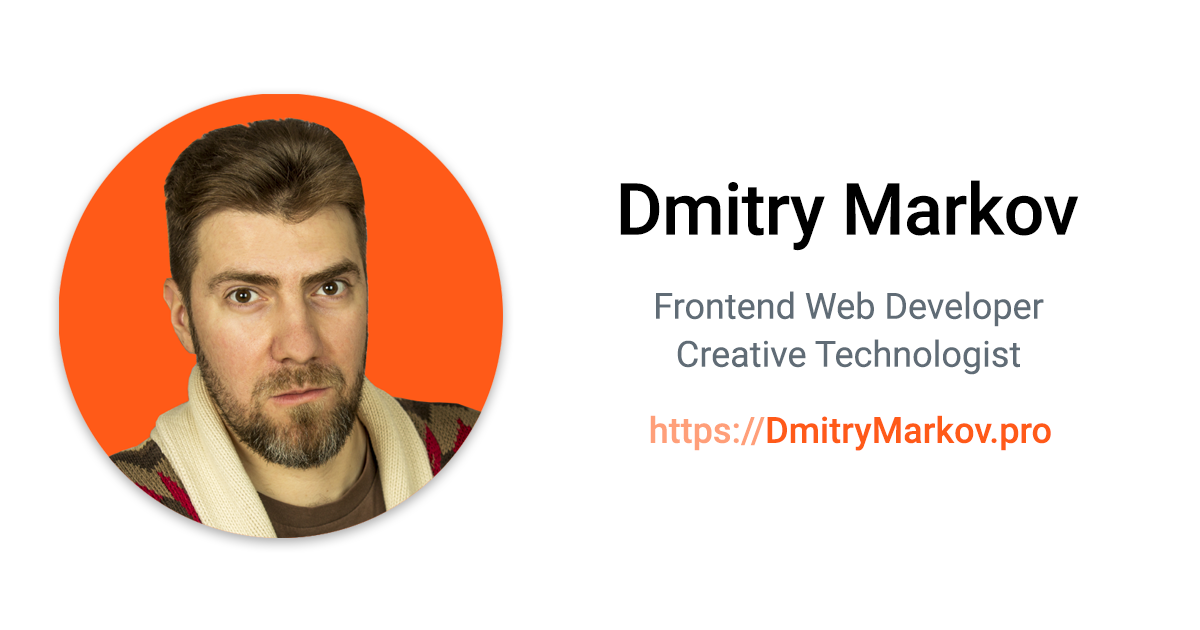
<style>
.page{position:relative;width:1200px;height:630px;background:#ffffff}
.page>*{position:absolute;margin:0}
.t1{font:72px "Roboto-Medium";letter-spacing:-0.01em;color:#000000}
.t2{font:36px/48px "Roboto-Regular";color:#606c76}
.t3{font:36px "Roboto-Medium";color:#ff5a18}
.t4{font:36px "Roboto-Medium";color:#ff9f79}
</style>
<div class="page">
<p class="t1" style="left:620px;top:180px;width:459px;height:71px">Dmitry Markov</p>
<p class="t2" style="left:656px;top:291px;width:388px;height:84px;text-align:center">Frontend Web Developer<br>Creative Technologist</p>
<p class="t3" style="left:650px;top:415px;width:401px;height:36px"><span class="t4">https://</span>DmitryMarkov.pro</p>
</div>
